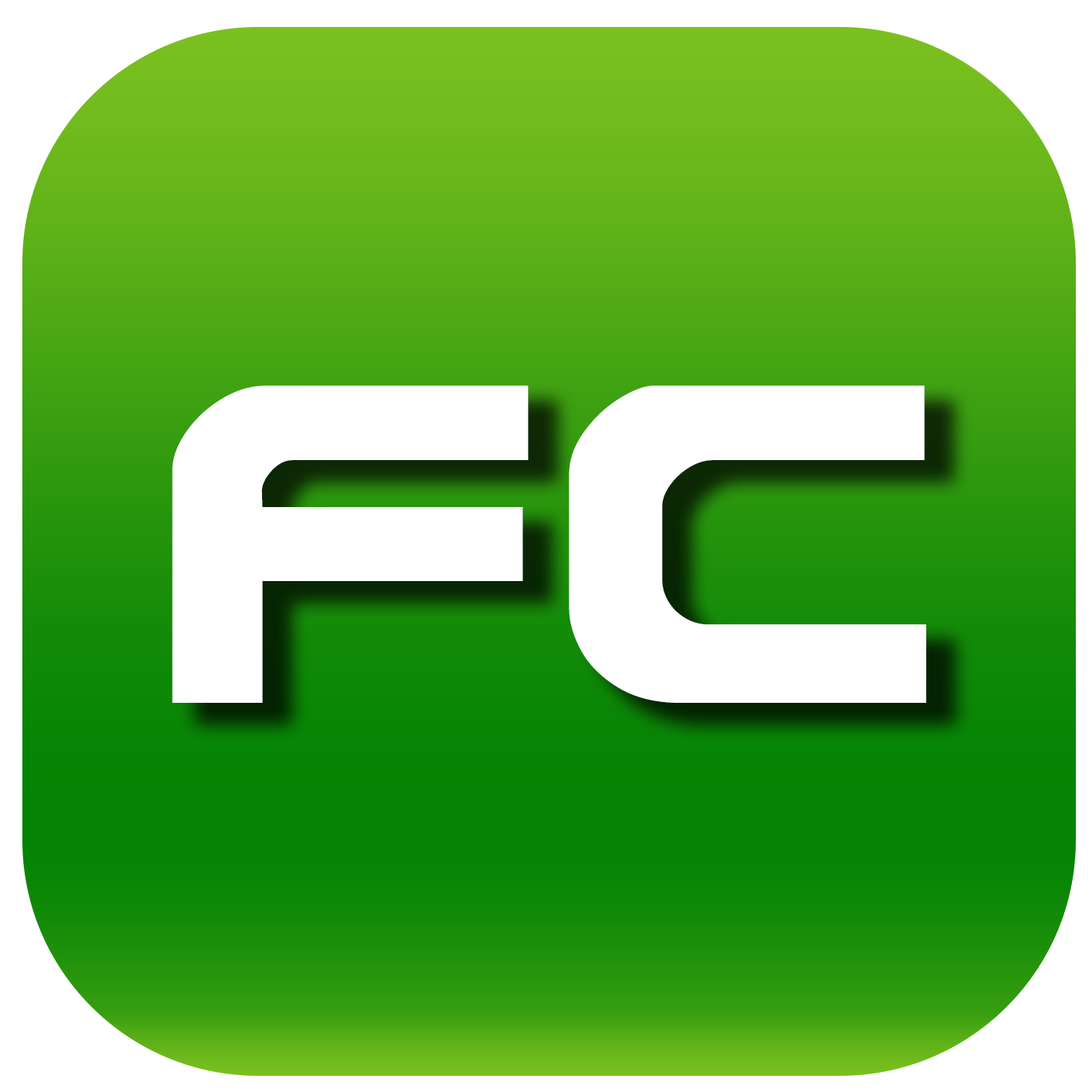
<style>
.page{position:relative;width:1092px;height:1092px;background:#ffffff}
.page>*{position:absolute;margin:0}
.t1{font:452.7px "EarthNormal";color:#ffffff}
</style>
<div class="page">
<p class="t1" style="left:172px;top:385px;width:754px;height:318px">fc</p>
</div>
